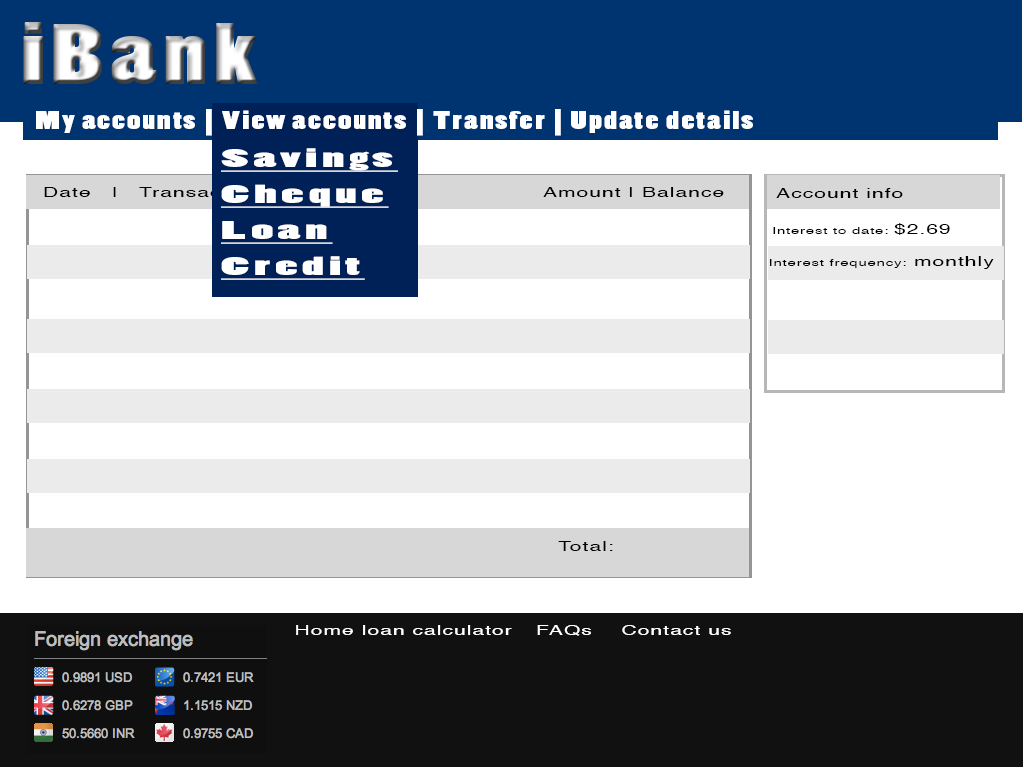
<style>
.page{position:relative;width:1024px;height:768px;background:#ffffff}
.page>*{position:absolute;margin:0}
.t1{font:24px "PoplarStd";letter-spacing:0.05em;color:#ffffff;scale:1.5 1}
.t2{font:24px "PoplarStd";letter-spacing:0.075em;color:#ffffff;text-decoration:underline;scale:2.5 1}
.t3{font:14px "Helvetica";letter-spacing:0.05em;scale:1.5 1}
.t4{font:14px "Helvetica";letter-spacing:0.05em;color:#000000;scale:1.5 1}
.t5{font:10px "Helvetica";letter-spacing:0.05em;color:#000000;scale:1.5 1}
.t6{font:14px "Helvetica";letter-spacing:0.05em;color:#ffffff;scale:1.5 1}
</style>
<div class="page">
<p class="t1" style="left:36px;top:109px;width:717px;height:27px">My accounts | View accounts | Transfer | Update details</p>
<p class="t2" style="left:221px;top:148px;width:177px;height:132px">Savings<br>Cheque<br>Loan<br>Credit</p>
<p class="t3" style="left:44px;top:187px;width:680px;height:10px">Date   |   Transaction ID |Memo |                        Amount | Balance</p>
<p class="t4" style="left:776px;top:188px;width:127px;height:10px">Account info</p>
<p class="t5" style="left:773px;top:223px;width:177px;height:12px">Interest to date: <span class="t4">$2.69</span></p>
<p class="t5" style="left:769px;top:256px;width:225px;height:13px">Interest frequency:<span class="t4"> monthly</span></p>
<p class="t4" style="left:558px;top:541px;width:55px;height:10px">Total:</p>
<p class="t6" style="left:296px;top:625px;width:216px;height:10px">Home loan calculator</p>
<p class="t6" style="left:537px;top:625px;width:54px;height:11px">FAQs</p>
<p class="t6" style="left:622px;top:625px;width:109px;height:10px">Contact us</p>
</div>
